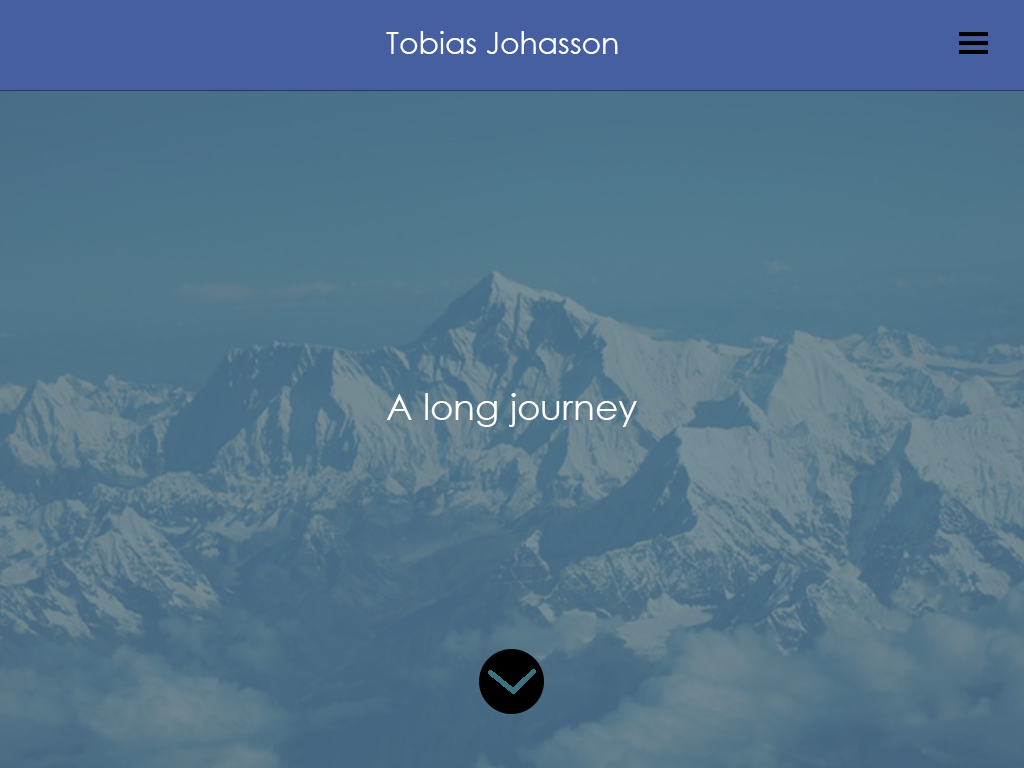
<style>
.page{position:relative;width:1024px;height:768px}
.page>*{position:absolute;margin:0}
.t1{font:30px "CenturyGothic";color:#ffffff}
.t2{font:36px "CenturyGothic";color:#ffffff}
</style>
<div class="page">
<p class="t1" style="left:386px;top:31px;width:232px;height:23px">Tobias Johasson</p>
<p class="t2" style="left:386px;top:393px;width:251px;height:34px">A long journey</p>
</div>
